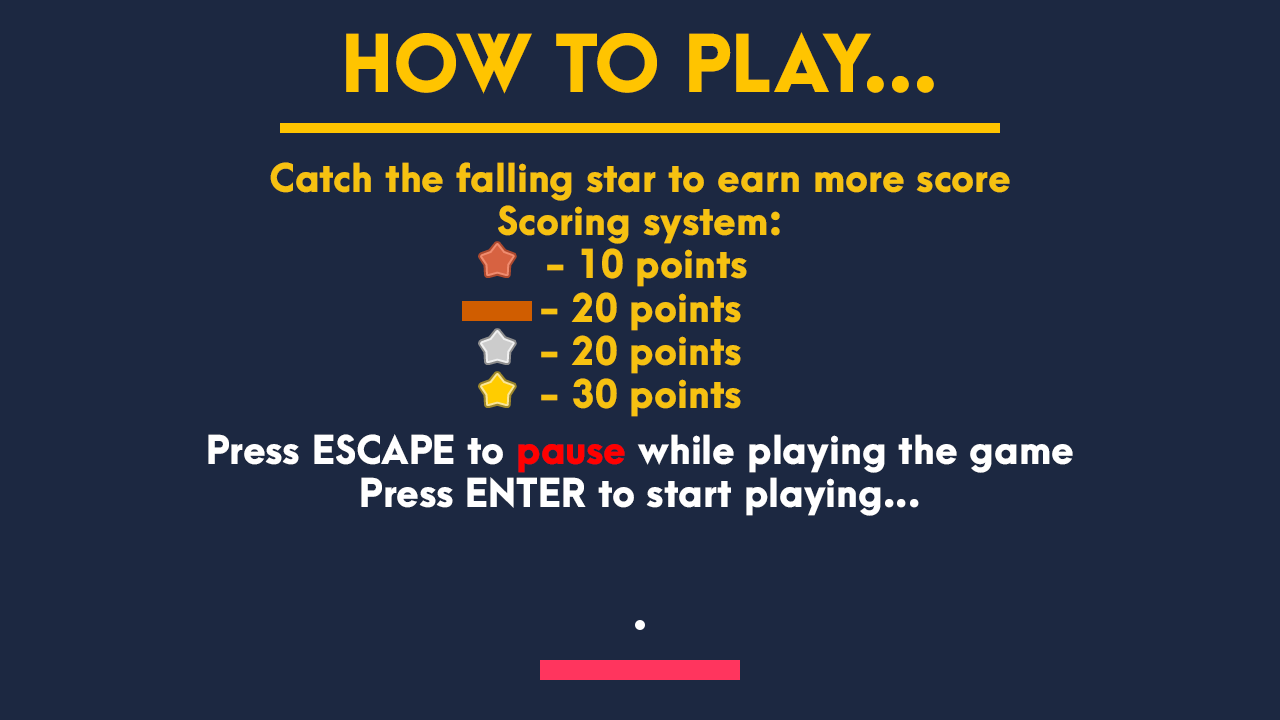
<style>
.page{position:relative;width:1280px;height:720px;background:#1c2841}
.page>*{position:absolute;margin:0}
.t1{font:72px "ArcaMajora3-Heavy";color:#ffc400}
.t2{font:36px "ArcaMajora3-Heavy";color:#f6c111}
.t3{font:36px "ArcaMajora3-Heavy";color:#ffffff}
.t4{font:36px "ArcaMajora3-Heavy";color:#ff0000}
</style>
<div class="page">
<p class="t1" style="left:346px;top:32px;width:588px;height:62px">HOW TO PLAY...</p>
<p class="t2" style="left:270px;top:162px;width:740px;height:255px;text-align:center">Catch the falling star to earn more score<br>Scoring system:<br> - 10 points<br>- 20 points<br>- 20 points<br>- 30 points</p>
<p class="t3" style="left:208px;top:434px;width:865px;height:82px;text-align:center">Press ESCAPE to <span class="t4">pause</span> while playing the game<br>Press ENTER to start playing...</p>
</div>
